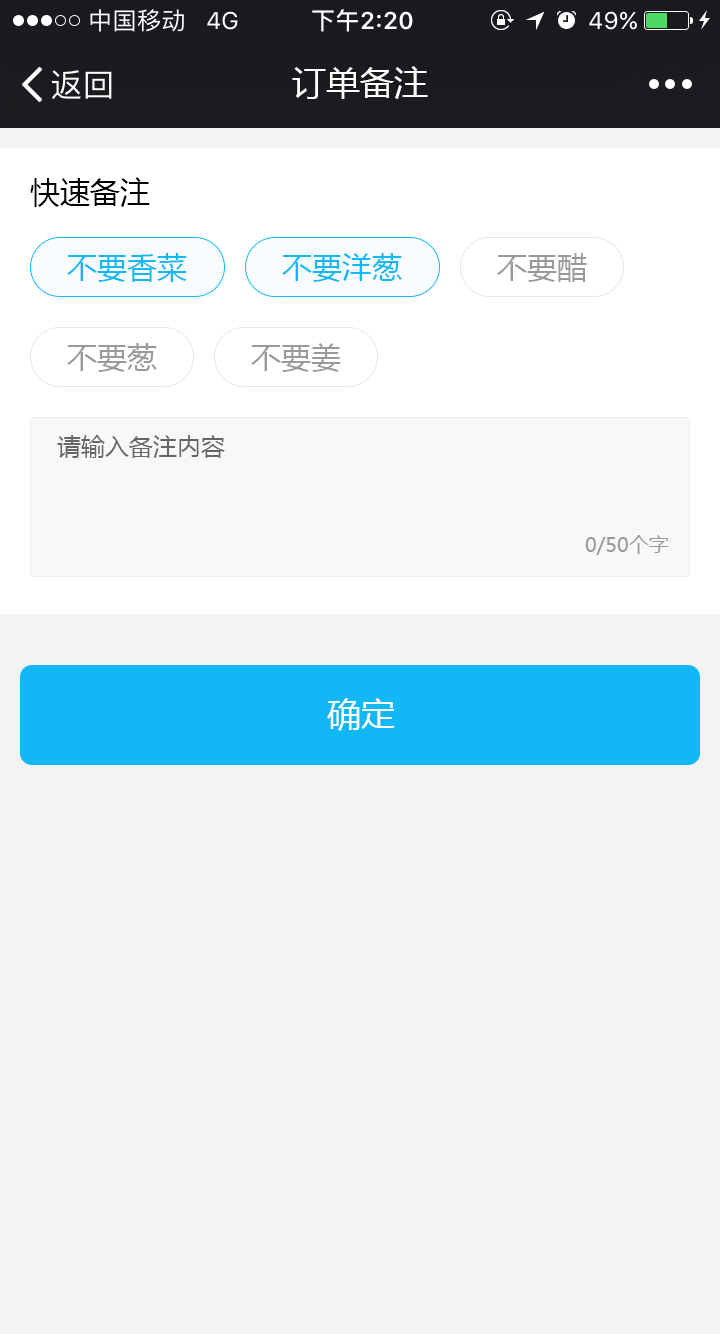
<style>
.page{position:relative;width:720px;height:1334px;background:#f3f3f3}
.page>*{position:absolute;margin:0}
.t1{font:34px "MicrosoftYaHei";color:#ffffff}
.t2{font:30px "MicrosoftYaHei";color:#000000}
.t3{font:30px "MicrosoftYaHei";color:#12b7f5}
.t4{font:30px "MicrosoftYaHei";color:#999999}
.t5{font:24px "MicrosoftYaHei";color:#666666}
.t6{font:20px "MicrosoftYaHei";color:#999999}
</style>
<div class="page">
<p class="t1" style="left:292px;top:66px;width:136px;height:33px">订单备注</p>
<p class="t2" style="left:30px;top:177px;width:120px;height:30px">快速备注</p>
<p class="t3" style="left:67px;top:253px;width:120px;height:29px">不要香菜</p>
<p class="t3" style="left:282px;top:253px;width:120px;height:29px">不要洋葱</p>
<p class="t4" style="left:497px;top:253px;width:90px;height:29px">不要醋</p>
<p class="t4" style="left:67px;top:343px;width:90px;height:29px">不要葱</p>
<p class="t4" style="left:251px;top:343px;width:90px;height:29px">不要姜</p>
<p class="t5" style="left:57px;top:435px;width:168px;height:23px">请输入备注内容</p>
<p class="t6" style="left:585px;top:535px;width:84px;height:20px">0/50个字</p>
<p class="t1" style="left:327px;top:698px;width:68px;height:33px">确定</p>
</div>
